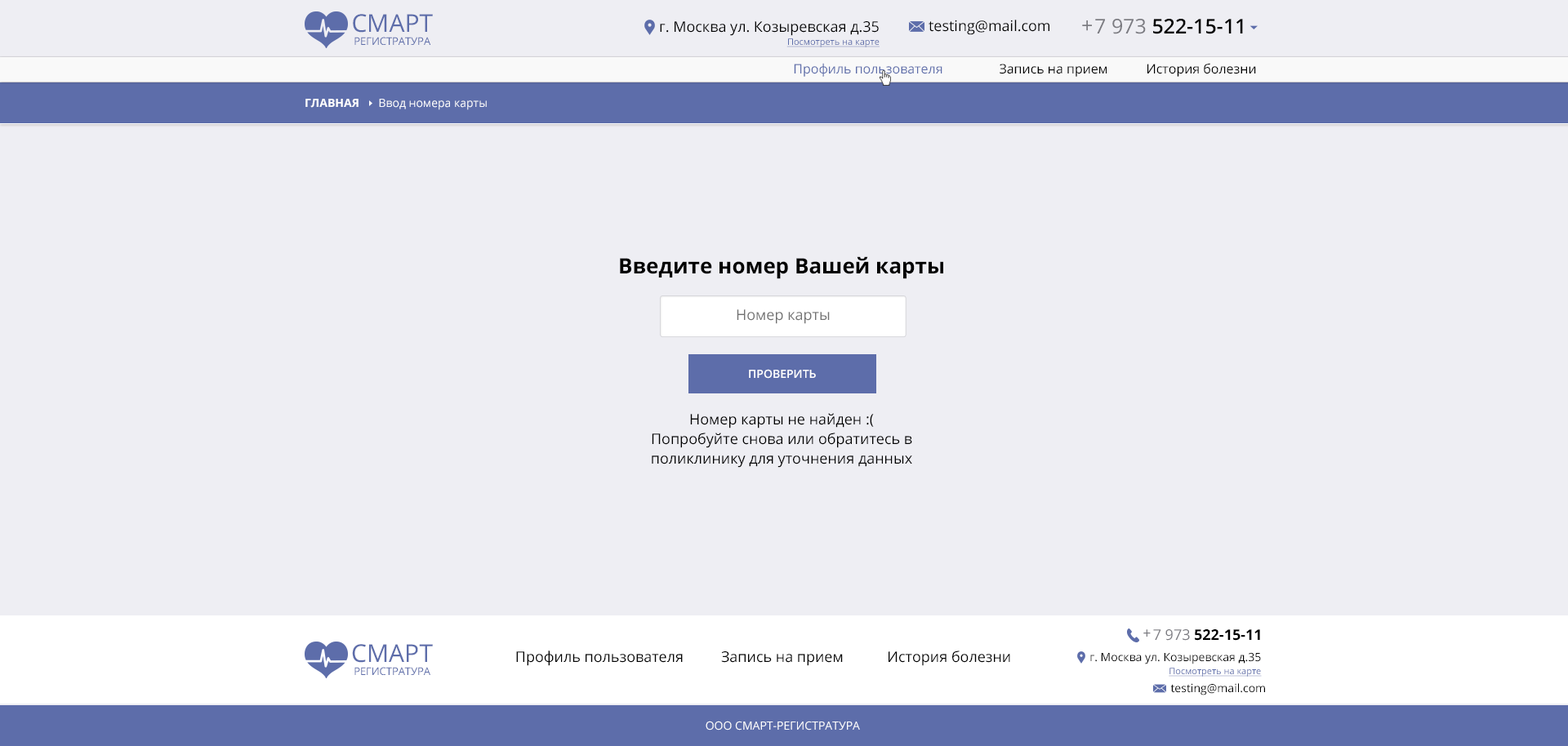
<style>
.page{position:relative;width:1568px;height:746px;background:#eeeef3}
.page>*{position:absolute;margin:0}
.t1{font:10.6px/13.1px "OpenSans";letter-spacing:-0.005em;color:#5d6daa}
.t2{font:24.5px/13.1px "OpenSans";color:#5d6daa}
.t3{font:14.7px/11.4px "OpenSans";color:#000000}
.t4{font:9px/13.1px "OpenSans";color:#5d6daa;text-decoration:underline}
.t5{font:14.7px "OpenSans";color:#000000}
.t6{font:20.4px "OpenSans";color:#7b7b81}
.t7{font:20.4px "OpenSans-Semibold";color:#000000}
.t8{font:20.4px "OpenSans";color:#000000}
.t9{font:13.1px "OpenSans";color:#000000}
.t10{font:13.1px "OpenSans";color:#5d6daa}
.t11{font:11.4px "OpenSans";color:#ffffff}
.t12{font:11.4px "OpenSans-Bold";color:#ffffff}
.t13{font:21.2px "OpenSans-Bold";color:#000000}
.t14{font:14.7px "OpenSans";color:#727272}
.t15{font:11.4px "OpenSans-Semibold";color:#ffffff;text-transform:uppercase}
.t16{font:14.7px/19.6px "OpenSans";color:#000000}
.t17{font:14.7px "OpenSans";color:#7b7b81}
.t18{font:14.7px "OpenSans-Bold";color:#000000}
.t19{font:11.4px/11.4px "OpenSans";color:#000000}
.t20{font:11.4px "OpenSans";color:#000000}
</style>
<div class="page">
<p class="t1" style="left:353px;top:14px;width:80px;height:31px;text-align:center"><span class="t2">CМАРТ<br></span>РЕГИСТРАТУРА</p>
<p class="t3" style="left:660px;top:21px;width:220px;height:26px;text-align:right">г. Москва ул. Козыревская д.35<br><span class="t4">Посмотреть на карте</span></p>
<p class="t5" style="left:929px;top:20px;width:120px;height:15px">testing@mail.com</p>
<p class="t6" style="left:1082px;top:20px;width:10px;height:11px">+</p>
<p class="t7" style="left:1095px;top:19px;width:148px;height:15px"><span class="t8">  </span><span class="t6">7 973 </span>522-15-11</p>
<p class="t9" style="left:794px;top:63px;width:462px;height:14px"><span class="t10">Профиль пользователя</span>  Запись на прием  История болезни</p>
<p class="t11" style="left:305px;top:99px;width:182px;height:11px"><span class="t12">ГЛАВНАЯ      </span>Ввод номера карты</p>
<p class="t13" style="left:620px;top:256px;width:323px;height:23px">Введите номер Вашей карты</p>
<p class="t14" style="left:737px;top:310px;width:93px;height:14px">Номер карты</p>
<p class="t15" style="left:749px;top:369px;width:67px;height:10px">ПРОВЕРИТЬ</p>
<p class="t16" style="left:652px;top:413px;width:260px;height:55px;text-align:center">Номер карты не найден :(<br>Попробуйте снова или обратитесь в поликлинику для уточнения данных</p>
<p class="t17" style="left:1143px;top:630px;width:8px;height:7px">+</p>
<p class="t18" style="left:1153px;top:630px;width:107px;height:11px"><span class="t5">  </span><span class="t17">7 973 </span>522-15-11</p>
<p class="t1" style="left:352px;top:644px;width:81px;height:31px;text-align:center"><span class="t2">CМАРТ<br></span>РЕГИСТРАТУРА</p>
<p class="t5" style="left:516px;top:651px;width:494px;height:15px">Профиль пользователя  Запись на прием      История болезни</p>
<p class="t19" style="left:1090px;top:653px;width:172px;height:24px;text-align:right">г. Москва ул. Козыревская д.35<br><span class="t4">Посмотреть на карте</span></p>
<p class="t20" style="left:1170px;top:684px;width:95px;height:12px">testing@mail.com</p>
<p class="t11" style="left:706px;top:721px;width:154px;height:10px">ООО СМАРТ-РЕГИСТРАТУРА</p>
</div>
